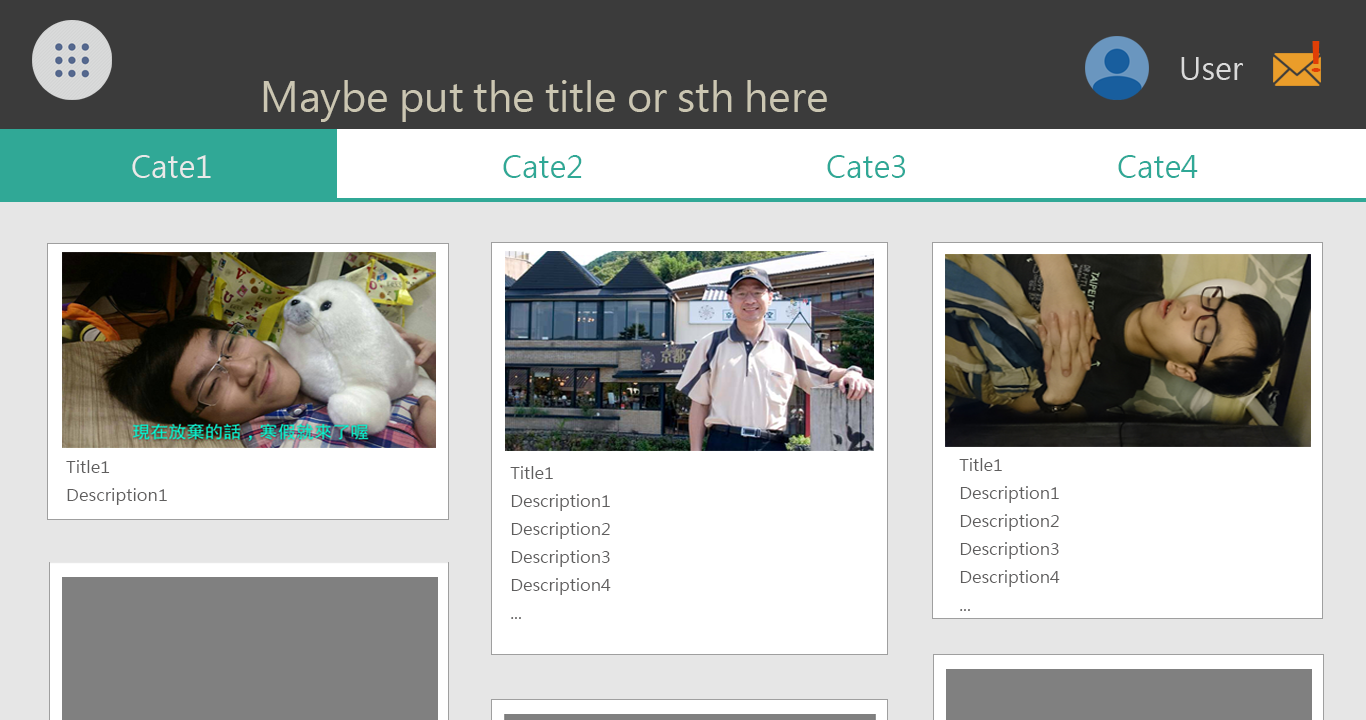
<style>
.page{position:relative;width:1366px;height:720px;background:#ffffff}
.page>*{position:absolute;margin:0}
.t1{font:30px "MicrosoftJhengHeiRegular";color:#dadada}
.t2{font:40px "MicrosoftJhengHeiRegular";color:#cbc6b2}
.t3{font:30px "MicrosoftJhengHeiRegular";color:#e9e9e9}
.t4{font:30px "MicrosoftJhengHeiRegular";color:#30a896}
.t5{font:16px "MicrosoftJhengHeiRegular";color:#5f5e5e;scale:1.06 1}
.t6{font:16px "MicrosoftJhengHeiRegular";color:#5f5e5e;scale:1.05 1}
</style>
<div class="page">
<p class="t1" style="left:1181px;top:57px;width:62px;height:23px">User</p>
<p class="t2" style="left:263px;top:80px;width:564px;height:42px">Maybe put the title or sth here</p>
<p class="t3" style="left:132px;top:155px;width:79px;height:23px">Cate1</p>
<p class="t4" style="left:503px;top:155px;width:79px;height:23px">Cate2</p>
<p class="t4" style="left:827px;top:155px;width:78px;height:23px">Cate3</p>
<p class="t4" style="left:1118px;top:155px;width:80px;height:23px">Cate4</p>
<p class="t5" style="left:66px;top:460px;width:101px;height:45px">Title1<br>Description1</p>
<p class="t6" style="left:959px;top:458px;width:101px;height:153px">Title1<br>Description1<br>Description2<br>Description3<br>Description4<br>...</p>
<p class="t6" style="left:510px;top:466px;width:101px;height:153px">Title1<br>Description1<br>Description2<br>Description3<br>Description4<br>...</p>
</div>
